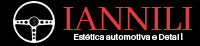
<style>
.page{position:relative;width:200px;height:46px;background:#000000}
.page>*{position:absolute;margin:0}
.t1{font:23.7px "AbhayaLibre-Regular";color:#df3d3d}
.t2{font:5.2px "Aileron-Regular";color:#ffffff}
</style>
<div class="page">
<p class="t1" style="left:63px;top:7px;width:130px;height:23px">IANNILI</p>
<p class="t2" style="left:74px;top:33px;width:109px;height:7px">Estética automotiva e Detai l</p>
</div>
